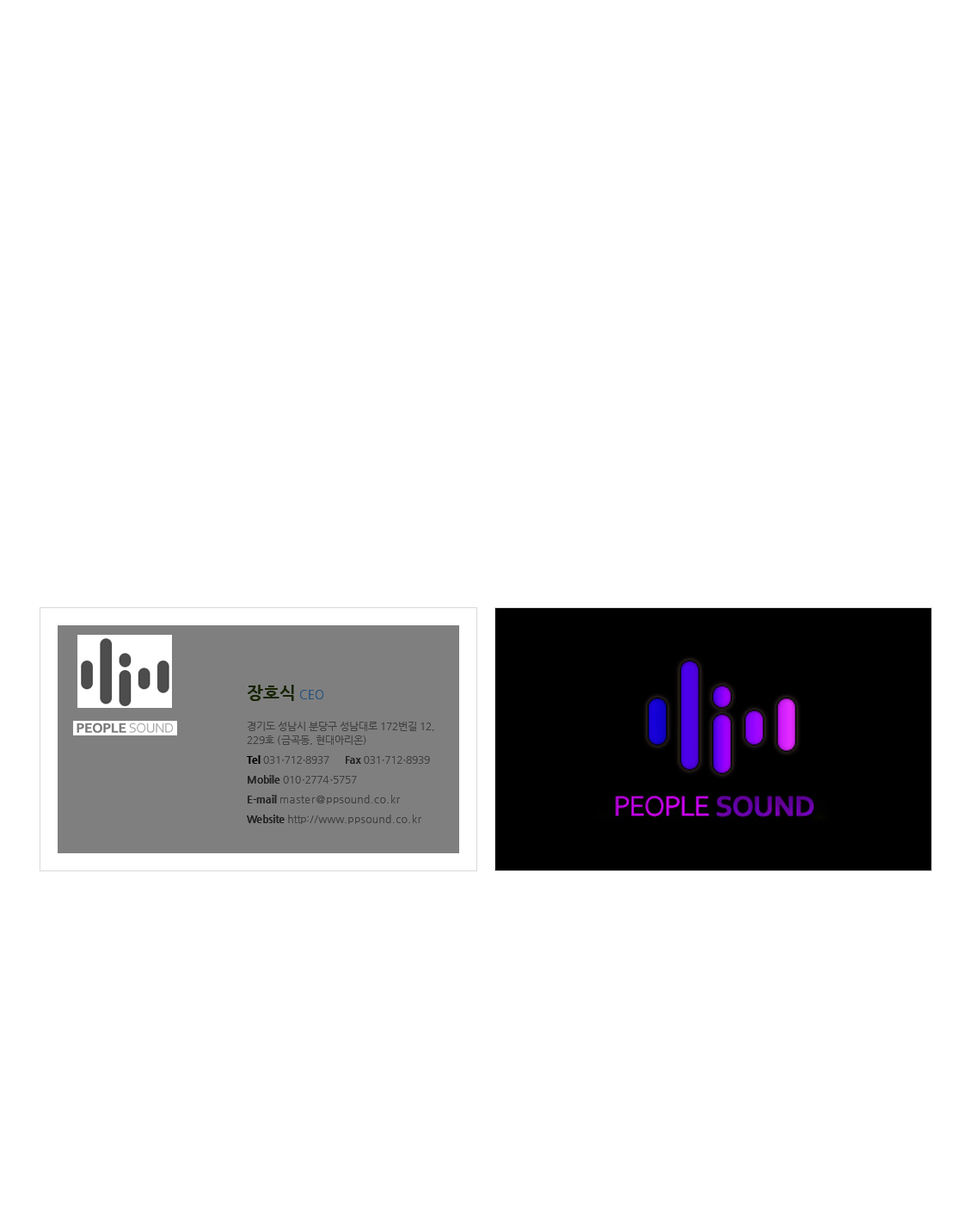
<style>
.page{position:relative;width:970px;height:1230px;background:#ffffff}
.page>*{position:absolute;margin:0}
.t1{font:17.2px "NanumGothicBold";color:#162301}
.t2{font:9.5px "NanumGothic";color:#3f3f3f}
.t3{font:12px "NanumGothic";color:#23507f}
.t4{font:10.3px/18.9px "NanumGothic";color:#3f3f3f}
.t5{font:10.3px/13.8px "NanumGothic";color:#3f3f3f}
.t6{font:10.3px/19.8px "NanumGothicExtraBold";color:#000000}
.t7{font:10.3px/19.8px "NanumGothic";color:#3f3f3f}
.t8{font:10.3px/19.8px "NanumGothic";color:#3f3f3f;font-weight:bold}
.t9{font:10.3px/19.8px "NanumGothicExtraBold";color:#232323}
.t10{font:10.3px/19.8px "NanumGothic";letter-spacing:0.05em;color:#3f3f3f}
</style>
<div class="page">
<p class="t1" style="left:248px;top:684px;width:76px;height:17px"><span class="t2"><br></span>장호식 <span class="t3">CEO</span></p>
<p class="t4" style="left:247px;top:721px;width:187px;height:103px">경기도 성남시 분당구 성남대로 172번길 12,<br><span class="t5">229호 (금곡동, 현대아리온)<br></span><span class="t6">Tel </span><span class="t7">031</span><span class="t8">.</span><span class="t7">712</span><span class="t8">.</span><span class="t7">8937      </span><span class="t9">Fax</span><span class="t7"> 031</span><span class="t8">.</span><span class="t7">712</span><span class="t8">.</span><span class="t7">8939<br></span><span class="t9">Mobile</span><span class="t7"> 010</span><span class="t8">.</span><span class="t7">2774</span><span class="t8">.</span><span class="t7">5757<br></span><span class="t9">E-mail </span><span class="t10">master@ppsound.co.kr<br></span><span class="t9">Website</span><span class="t7"> http://www.</span><span class="t10">ppsound.co.kr</span></p>
</div>
